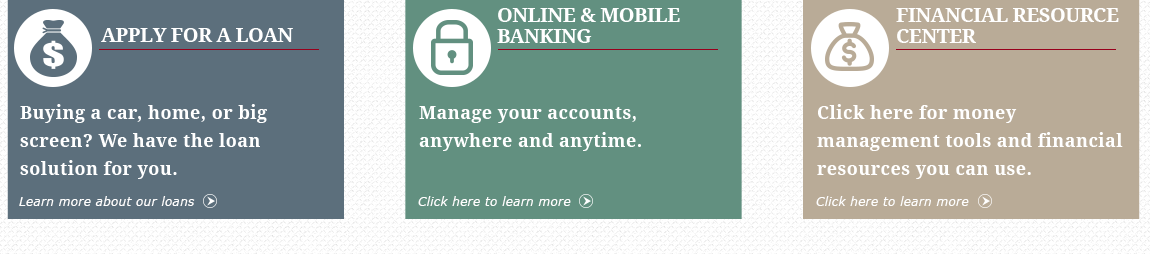
<style>
.page{position:relative;width:1150px;height:254px;background:#5c6f7c}
.page>*{position:absolute;margin:0}
.t1{font:20px/18px "DroidSerif-Bold";letter-spacing:-0.025em;color:#ffffff}
.t2{font:20px "DroidSerif-Bold";letter-spacing:-0.025em;color:#ffffff}
.t3{font:18px/28px "DroidSerif-Bold";letter-spacing:0.025em;color:#ffffff}
.t4{font:12px "Verdana-Italic";letter-spacing:0.025em;color:#ffffff}
</style>
<div class="page">
<p class="t1" style="left:497px;top:8px;width:183px;height:35px">ONLINE &amp; MOBILE<br>BANKING</p>
<p class="t1" style="left:896px;top:8px;width:223px;height:35px">FINANCIAL RESOURCE<br>CENTER</p>
<p class="t2" style="left:101px;top:28px;width:192px;height:14px">APPLY FOR A LOAN</p>
<p class="t3" style="left:20px;top:104px;width:247px;height:75px">Buying a car, home, or big screen? We have the loan solution for you.</p>
<p class="t3" style="left:419px;top:106px;width:222px;height:45px">Manage your accounts, anywhere and anytime.</p>
<p class="t3" style="left:817px;top:104px;width:306px;height:75px">Click here for money management tools and financial resources you can use.</p>
<p class="t4" style="left:19px;top:196px;width:176px;height:10px">Learn more about our loans</p>
<p class="t4" style="left:418px;top:196px;width:153px;height:10px">Click here to learn more</p>
<p class="t4" style="left:816px;top:196px;width:153px;height:10px">Click here to learn more</p>
</div>
